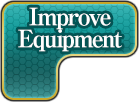
<style>
.page{position:relative;width:139px;height:102px;background:#ffffff}
.page>*{position:absolute;margin:0}
.t1{font:24px/22px "RyuminPro-ExBold";letter-spacing:-0.08em;color:#ffffff}
</style>
<div class="page">
<p class="t1" style="left:18px;top:7px;width:104px;height:45px;text-align:center">Improve<br>Equipment</p>
</div>
